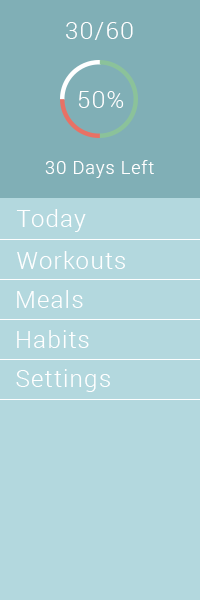
<style>
.page{position:relative;width:200px;height:600px;background:#b3d8de}
.page>*{position:absolute;margin:0}
.t1{font:24px "Roboto-Light";letter-spacing:0.05em;color:#ffffff}
.t2{font:18px "Roboto-Light";letter-spacing:0.05em;color:#ffffff}
</style>
<div class="page">
<p class="t1" style="left:66px;top:22px;width:67px;height:18px">30/60</p>
<p class="t1" style="left:79px;top:91px;width:45px;height:17px">50%</p>
<p class="t2" style="left:45px;top:160px;width:109px;height:18px">30 Days Left</p>
<p class="t1" style="left:16px;top:209px;width:70px;height:23px">Today</p>
<p class="t1" style="left:17px;top:251px;width:108px;height:18px">Workouts</p>
<p class="t1" style="left:17px;top:290px;width:66px;height:18px">Meals</p>
<p class="t1" style="left:17px;top:330px;width:72px;height:18px">Habits</p>
<p class="t1" style="left:16px;top:369px;width:94px;height:23px">Settings</p>
</div>
